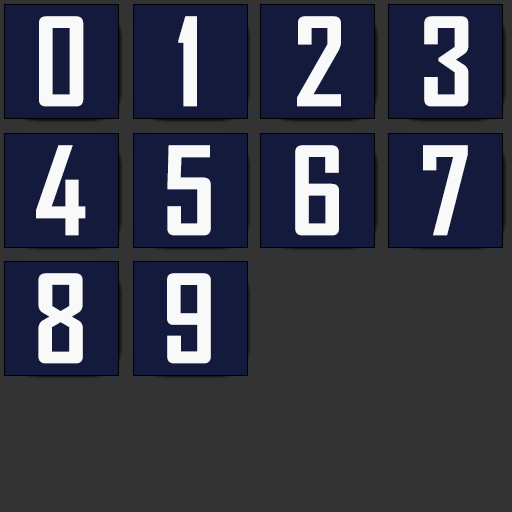
<style>
.page{position:relative;width:512px;height:512px;background:#333333}
.page>*{position:absolute;margin:0}
.t1{font:117.6px "AgencyFB-Bold";color:#f9f9f9}
</style>
<div class="page">
<p class="t1" style="left:39px;top:16px;width:45px;height:91px">0</p>
<p class="t1" style="left:178px;top:16px;width:19px;height:91px">1</p>
<p class="t1" style="left:297px;top:16px;width:44px;height:91px">2</p>
<p class="t1" style="left:424px;top:16px;width:45px;height:91px">3</p>
<p class="t1" style="left:36px;top:145px;width:50px;height:91px">4</p>
<p class="t1" style="left:167px;top:145px;width:44px;height:91px">5</p>
<p class="t1" style="left:295px;top:145px;width:44px;height:91px">6</p>
<p class="t1" style="left:423px;top:145px;width:45px;height:91px">7</p>
<p class="t1" style="left:38px;top:273px;width:45px;height:91px">8</p>
<p class="t1" style="left:167px;top:273px;width:44px;height:91px">9</p>
</div>
